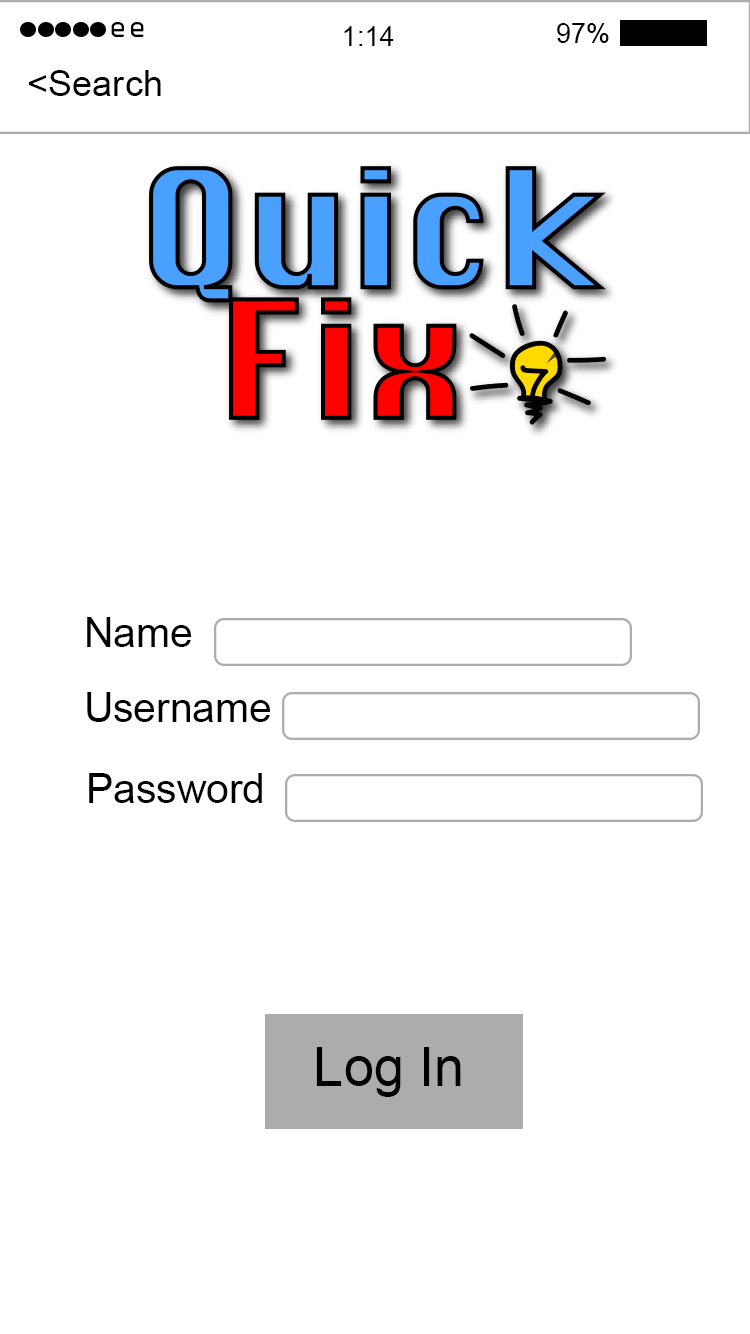
<style>
.page{position:relative;width:750px;height:1334px;background:#ffffff}
.page>*{position:absolute;margin:0}
.t1{font:27.2px "OCRAStd";color:#000000}
.t2{font:27.2px "ArialMT";color:#000000}
.t3{font:36.2px "ArialMT";color:#000000}
.t4{font:40.8px "ArialMT";color:#000000}
.t5{font:54.3px "ArialMT";color:#000000}
</style>
<div class="page">
<p class="t1" style="left:111px;top:22px;width:33px;height:15px">ee</p>
<p class="t2" style="left:344px;top:26px;width:50px;height:20px">1:14</p>
<p class="t2" style="left:557px;top:23px;width:52px;height:20px">97%</p>
<p class="t3" style="left:29px;top:70px;width:132px;height:26px">&lt;Search</p>
<p class="t4" style="left:87px;top:617px;width:104px;height:30px">Name</p>
<p class="t4" style="left:87px;top:692px;width:183px;height:30px">Username</p>
<p class="t4" style="left:89px;top:773px;width:173px;height:30px">Password</p>
<p class="t5" style="left:316px;top:1047px;width:145px;height:50px">Log In</p>
</div>
